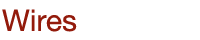
<style>
.page{position:relative;width:200px;height:40px;background:#ffffff}
.page>*{position:absolute;margin:0}
.t1{font:30px "HelveticaNeue";color:#931b0c}
</style>
<div class="page">
<p class="t1" style="left:2px;top:9px;width:75px;height:23px">Wires</p>
</div>
